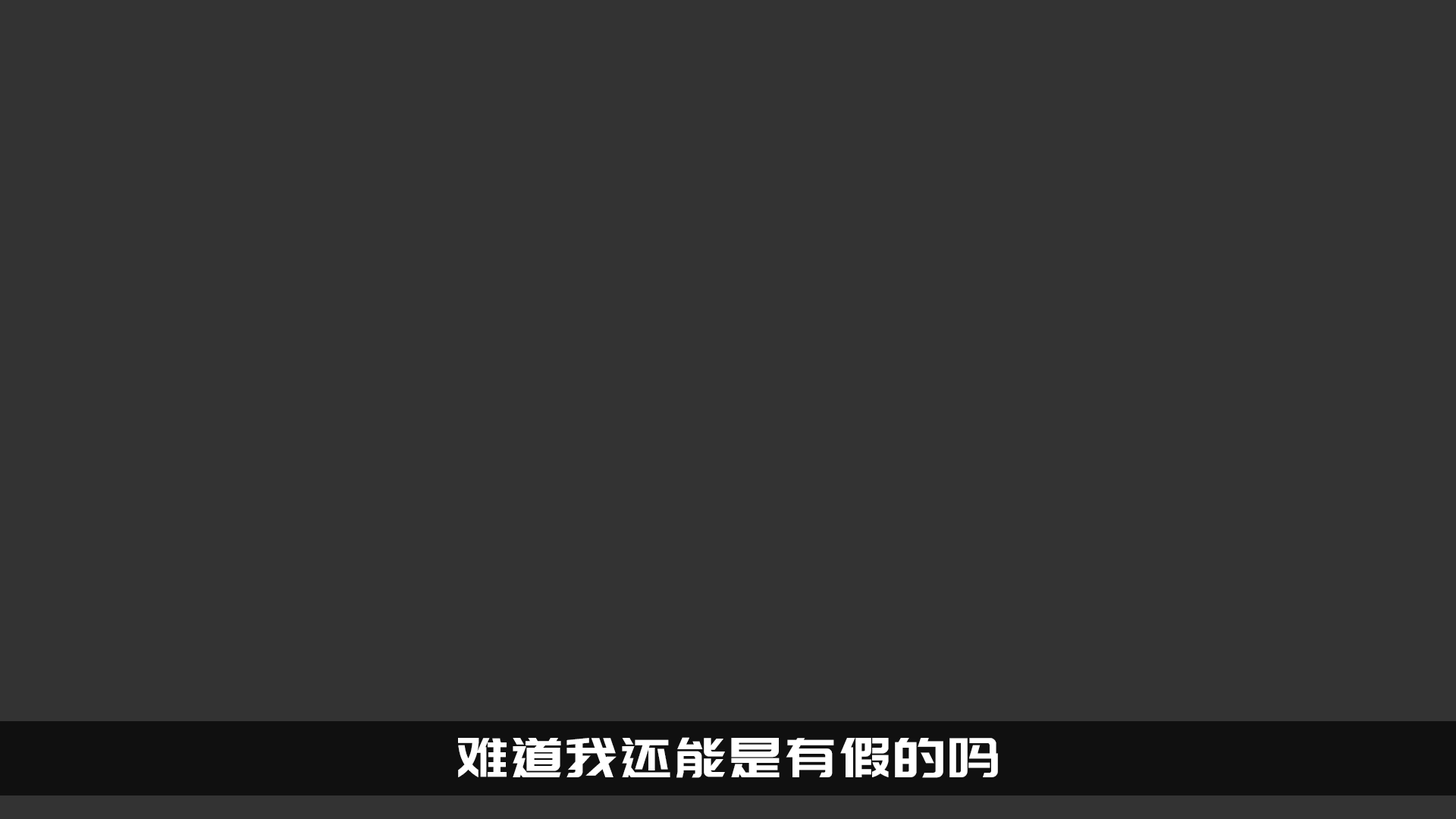
<style>
.page{position:relative;width:1456px;height:819px;background:#333333}
.page>*{position:absolute;margin:0}
.t1{font:54.6px "PangMenZhengDao-3";color:#ffffff}
</style>
<div class="page">
<p class="t1" style="left:458px;top:737px;width:540px;height:41px">难道我还能是有假的吗</p>
</div>
